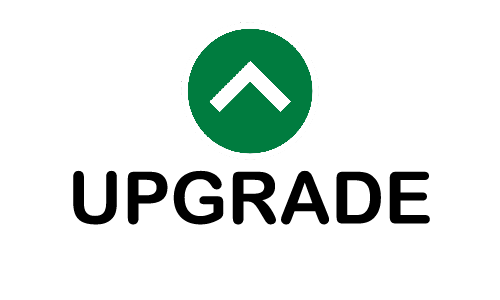
<style>
.page{position:relative;width:500px;height:300px;background:#ffffff}
.page>*{position:absolute;margin:0}
.t1{font:72px "ArialRoundedMTBold";color:#000000}
</style>
<div class="page">
<p class="t1" style="left:73px;top:170px;width:357px;height:55px">UPGRADE</p>
</div>
